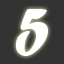
<style>
.page{position:relative;width:64px;height:64px;background:#333333}
.page>*{position:absolute;margin:0}
.t1{font:72px "ForteMT";color:#ffffff}
</style>
<div class="page">
<p class="t1" style="left:15px;top:9px;width:33px;height:47px">5</p>
</div>
